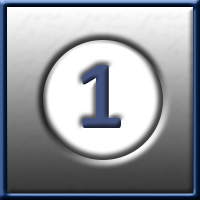
<style>
.page{position:relative;width:200px;height:200px}
.page>*{position:absolute;margin:0}
.t1{font:100px "Calibri-Bold"}
</style>
<div class="page">
<p class="t1" style="left:82px;top:65px;width:40px;height:63px">1</p>
</div>
